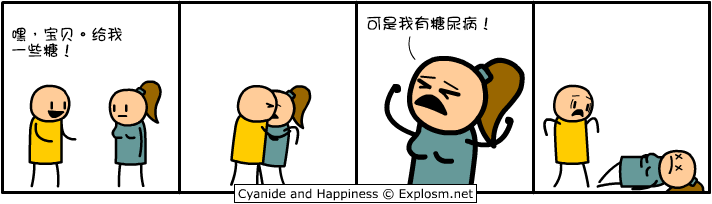
<style>
.page{position:relative;width:712px;height:204px;background:#ffffff}
.page>*{position:absolute;margin:0}
.t1{font:16px "DFGirl";color:#000000}
.t2{font:16px/16px "DFGirl";color:#000000}
</style>
<div class="page">
<p class="t1" style="left:367px;top:16px;width:121px;height:15px">可是我有糖尿病！</p>
<p class="t2" style="left:12px;top:27px;width:110px;height:31px">嘿，宝贝。给我<br>一些糖！</p>
</div>
